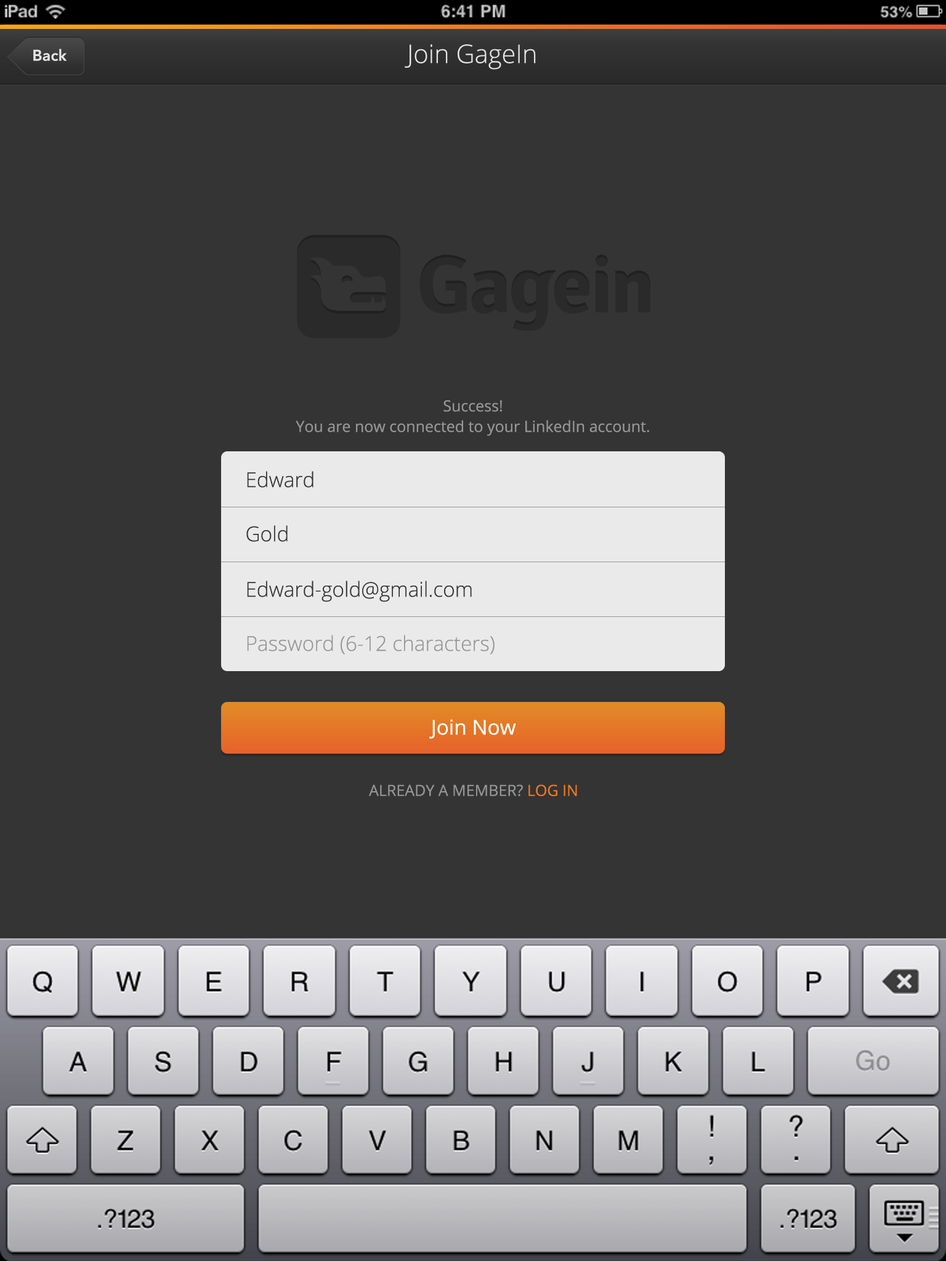
<style>
.page{position:relative;width:946px;height:1261px;background:#343434}
.page>*{position:absolute;margin:0}
.t1{font:15.4px "AvenirNext-DemiBold";color:#e5e5e5}
.t2{font:25.7px "OpenSans-Light";color:#e5e5e5}
.t3{font:15.4px/20.5px "OpenSans";color:#969696}
.t4{font:20.5px "OpenSans-Light";color:#343434}
.t5{font:20.5px "OpenSans-Light";color:#969696}
.t6{font:20.5px "OpenSans";color:#ffffff}
.t7{font:15.4px "OpenSans";color:#969696}
.t8{font:15.4px "OpenSans";color:#ec7a27}
</style>
<div class="page">
<p class="t1" style="left:33px;top:49px;width:34px;height:12px">Back</p>
<p class="t2" style="left:405px;top:44px;width:131px;height:26px">Join GageIn</p>
<p class="t3" style="left:296px;top:400px;width:353px;height:36px;text-align:center">Success!<br>You are now connected to your LinkedIn account.</p>
<p class="t4" style="left:247px;top:471px;width:66px;height:17px">Edward</p>
<p class="t4" style="left:246px;top:525px;width:42px;height:17px">Gold</p>
<p class="t4" style="left:247px;top:581px;width:225px;height:21px">Edward-gold@gmail.com</p>
<p class="t5" style="left:247px;top:635px;width:247px;height:19px">Password (6-12 characters)</p>
<p class="t6" style="left:429px;top:719px;width:87px;height:20px">Join Now</p>
<p class="t7" style="left:369px;top:784px;width:208px;height:13px">ALREADY A MEMBER? <span class="t8">LOG IN</span></p>
</div>
